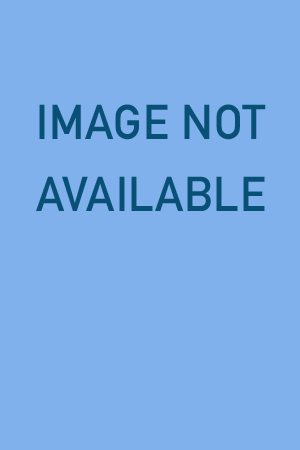
<style>
.page{position:relative;width:300px;height:450px;background:#81b1ed}
.page>*{position:absolute;margin:0}
.t1{font:48px/18px "DINAlternate-Bold";color:#085076}
</style>
<div class="page">
<p class="t1" style="left:36px;top:104px;width:230px;height:107px;text-align:center">IMAGE NOT<br><br><br><br>AVAILABLE</p>
</div>
